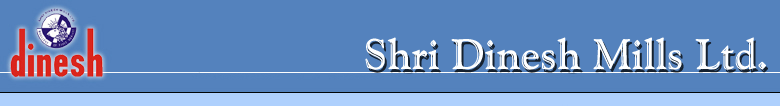
<style>
.page{position:relative;width:780px;height:106px;background:#5482bd}
.page>*{position:absolute;margin:0}
.t1{font:42.3px "GoudyHandtooledBT-Regular";letter-spacing:0.01em;color:#feffff}
</style>
<div class="page">
<p class="t1" style="left:365px;top:37px;width:401px;height:33px">Shri Dinesh Mills Ltd.</p>
</div>
